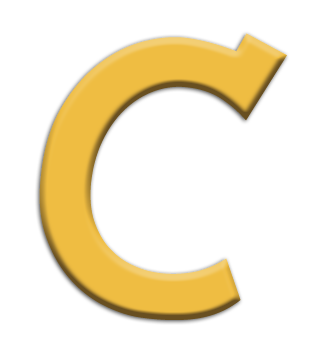
<style>
.page{position:relative;width:320px;height:352px;background:#ffffff}
.page>*{position:absolute;margin:0}
.t1{font:422px "FinkHeavy";color:#efbd42}
</style>
<div class="page">
<p class="t1" style="left:39px;top:33px;width:248px;height:287px;rotate:11deg">C</p>
</div>
